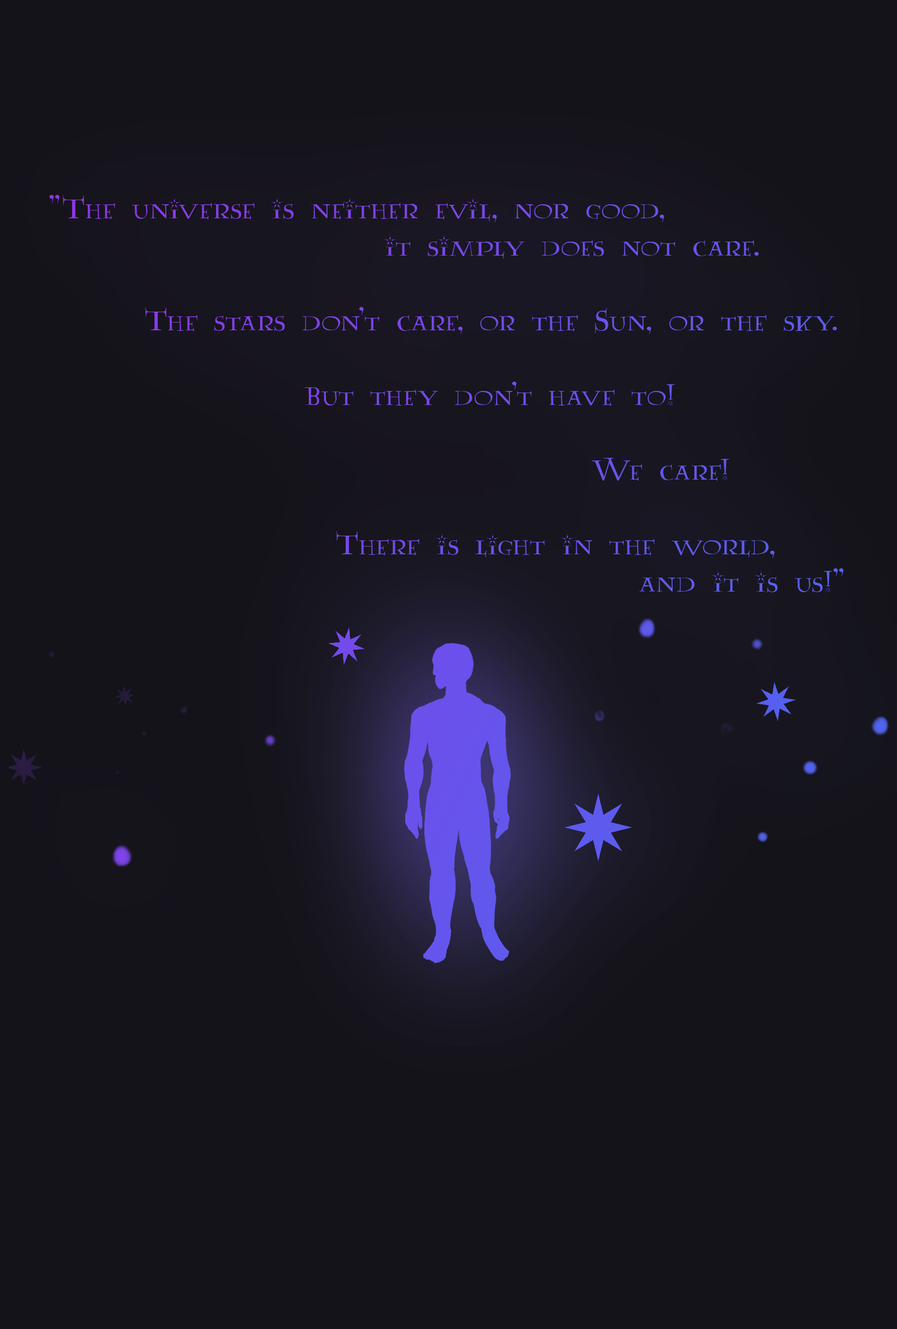
<style>
.page{position:relative;width:897px;height:1329px;background:#141319}
.page>*{position:absolute;margin:0}
.t1{font:31.1px "AA-Lumos-Caps";color:#714ceb}
</style>
<div class="page">
<p class="t1" style="left:49px;top:195px;width:795px;height:398px">"The universe is neither evil, nor good, <br>                     it simply does not care. <br>           <br>      The stars don't care, or the Sun, or the sky. <br> <br>                But they don't have to!<br> <br>                                  We care! <br><br>                  There is light in the world, <br>                                     and it is us!"</p>
</div>
